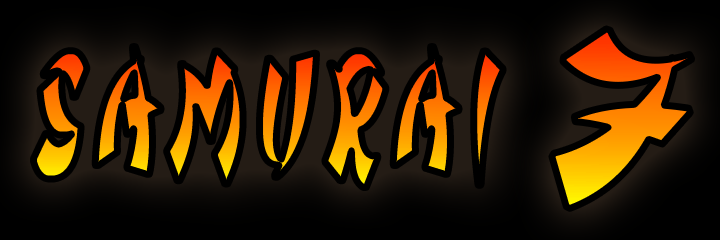
<style>
.page{position:relative;width:720px;height:240px;background:#000000}
.page>*{position:absolute;margin:0}
.t1{font:255px "ChinatownChamps-Italic";letter-spacing:0.13em;font-weight:bold;scale:1.04 1}
.t2{font:194.7px "ChinatownChamps-Italic";letter-spacing:0.13em;font-weight:bold;scale:0.49 1}
</style>
<div class="page">
<p class="t1" style="left:551px;top:28px;width:141px;height:181px">7</p>
<p class="t2" style="left:33px;top:46px;width:470px;height:142px">SAMURAI</p>
</div>
